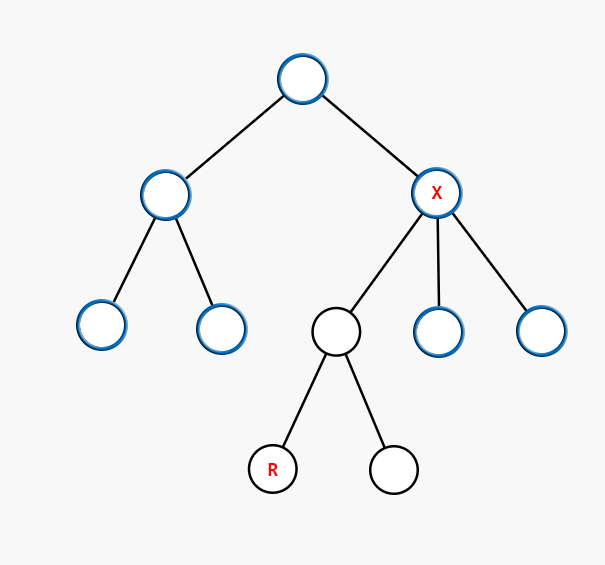
<style>
.page{position:relative;width:605px;height:565px;background:#f8f8f8}
.page>*{position:absolute;margin:0}
.t1{font:20px "Consolas-Bold";color:#ff0000}
</style>
<div class="page">
<p class="t1" style="left:431px;top:186px;width:12px;height:13px">X</p>
<p class="t1" style="left:268px;top:463px;width:10px;height:13px">R</p>
</div>
